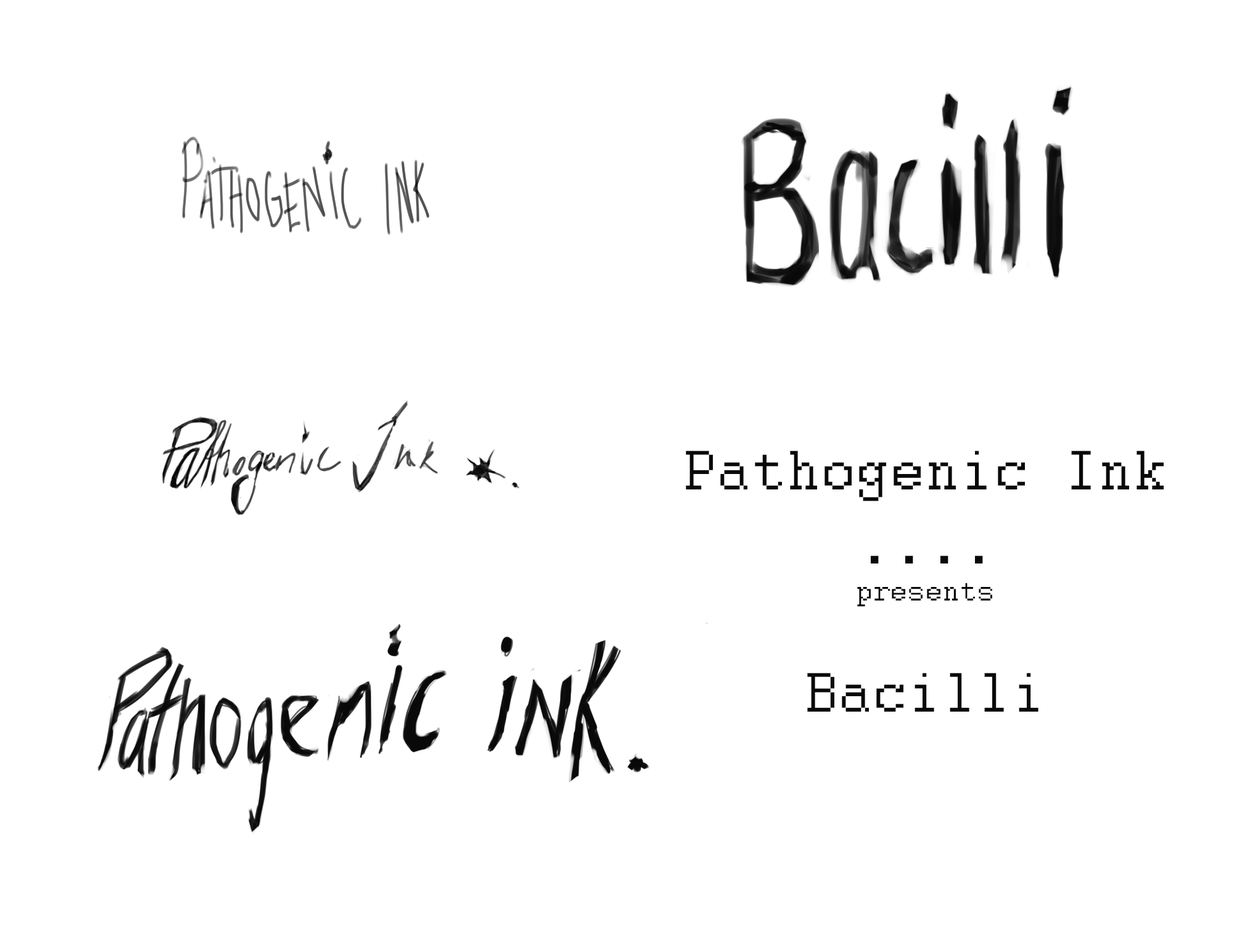
<style>
.page{position:relative;width:1258px;height:948px;background:#ffffff}
.page>*{position:absolute;margin:0}
.t1{font:61.7px "Courier";color:#090909}
.t2{font:30.8px "Courier";color:#090909}
</style>
<div class="page">
<p class="t1" style="left:686px;top:450px;width:478px;height:261px;text-align:center">Pathogenic Ink<br>....<br><span class="t2">presents<br><br></span>Bacilli</p>
</div>
